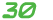
<style>
.page{position:relative;width:53px;height:20px;background:#ffffff}
.page>*{position:absolute;margin:0}
.t1{font:19.4px "DestructoBeamBB-Bold";color:#4db443}
</style>
<div class="page">
<p class="t1" style="left:2px;top:2px;width:35px;height:17px">30</p>
</div>
